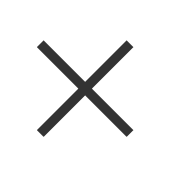
<style>
.page{position:relative;width:169px;height:169px;background:#ffffff}
.page>*{position:absolute;margin:0}
.t1{font:150px "KozGoPr6N-Regular";color:#333333;text-transform:uppercase}
</style>
<div class="page">
<p class="t1" style="left:37px;top:40px;width:97px;height:97px">×</p>
</div>
